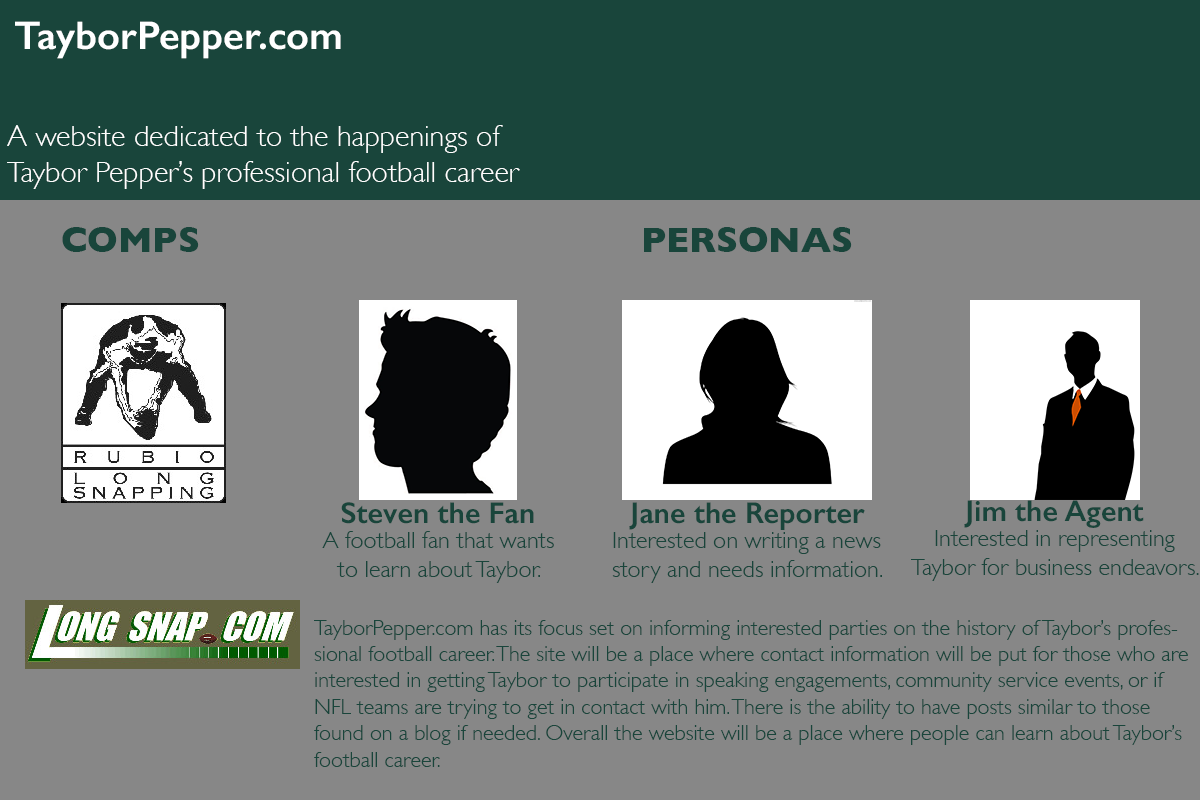
<style>
.page{position:relative;width:1200px;height:800px;background:#878787}
.page>*{position:absolute;margin:0}
.t1{font:40px "GillSans-SemiBold";color:#ffffff}
.t2{font:30px "GillSans-Light";color:#ffffff}
.t3{font:36px "GillSans-Bold";color:#19453b}
.t4{font:30px "GillSans-SemiBold";color:#19453b}
.t5{font:24px "GillSans-Light";color:#19453b}
.t6{font:22px "GillSans-Light";color:#19453b}
</style>
<div class="page">
<p class="t1" style="left:15px;top:21px;width:326px;height:38px">TayborPepper.com</p>
<p class="t2" style="left:7px;top:125px;width:513px;height:64px">A website dedicated to the happenings of Taybor Pepper’s professional football career and community outreach efforts.</p>
<p class="t3" style="left:62px;top:227px;width:137px;height:25px">COMPS</p>
<p class="t3" style="left:644px;top:227px;width:208px;height:25px">PERSONAS</p>
<p class="t4" style="left:341px;top:502px;width:193px;height:22px">Steven the Fan</p>
<p class="t4" style="left:629px;top:502px;width:236px;height:28px">Jane the Reporter</p>
<p class="t4" style="left:964px;top:500px;width:180px;height:28px">Jim the Agent</p>
<p class="t5" style="left:322px;top:531px;width:232px;height:52px;text-align:center">A football fan that wants to learn about Taybor.</p>
<p class="t5" style="left:612px;top:532px;width:270px;height:51px;text-align:center">Interested on writing a news story and needs information.</p>
<p class="t5" style="left:911px;top:530px;width:288px;height:51px;text-align:center">Interested in representing Taybor for business endeavors.</p>
<p class="t6" style="left:314px;top:620px;width:874px;height:147px">TayborPepper.com has its focus set on informing interested parties on the history of Taybor’s professional football career. The site will be a place where contact information will be put for those who are interested in getting Taybor to participate in speaking engagements, community service events, or if NFL teams are trying to get in contact with him. There is the ability to have posts similar to those found on a blog if needed. Overall the website will be a place where people can learn about Taybor’s football career.</p>
</div>
